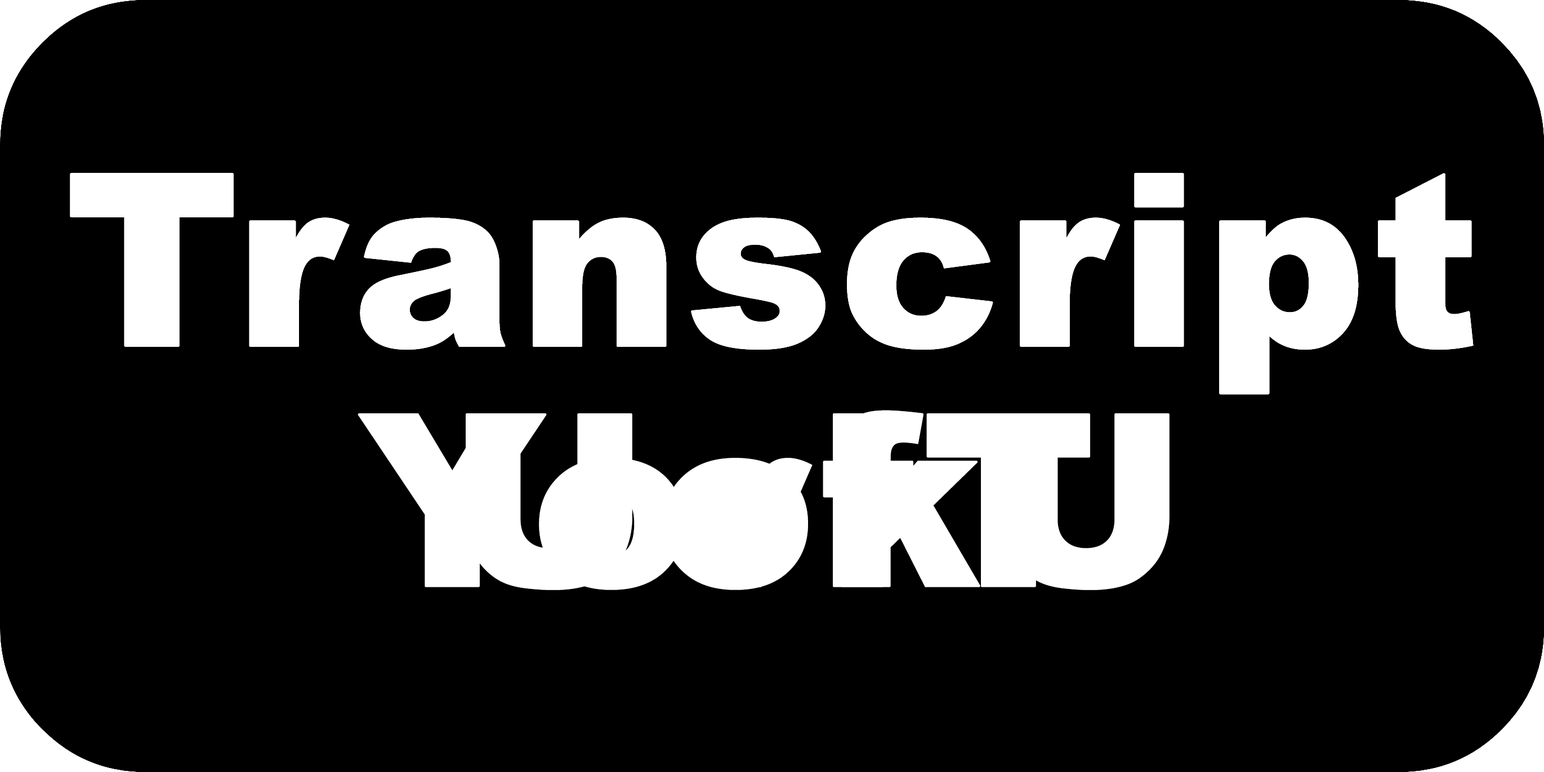
<style>
.page{position:relative;width:1544px;height:772px;background:#000000}
.page>*{position:absolute;margin:0}
.t1{font:240.3px/90.1px "Arial-Black";color:#ffffff;font-weight:bold}
</style>
<div class="page">
<p class="t1" style="left:70px;top:173px;width:1404px;height:417px;text-align:center">Transcript<br>YorkU</p>
<p class="t1" style="left:70px;top:173px;width:1404px;height:417px;text-align:center">Transcript<br>UofT</p>
</div>
